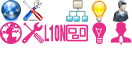
<style>
.page{position:relative;width:132px;height:66px;background:#ffffff}
.page>*{position:absolute;margin:0}
.t1{font:21.5px "Helvetica-CondensedBold";color:#e52d87;text-transform:uppercase;scale:0.48 1}
</style>
<div class="page">
<p class="t1" style="left:44px;top:24px;width:22px;height:18px">L10N</p>
</div>
